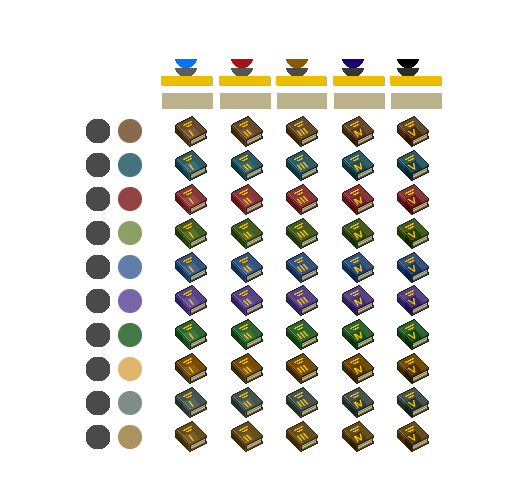
<style>
.page{position:relative;width:511px;height:487px;background:#ffffff}
.page>*{position:absolute;margin:0}
.t1{font:9px "ArialMT";letter-spacing:-0.12em;color:#ffcc00;scale:1.15 1}
</style>
<div class="page">
<p class="t1" style="left:188px;top:130px;width:6px;height:6px;rotate:-19deg">I</p>
<p class="t1" style="left:243px;top:129px;width:9px;height:8px;rotate:-28deg">I I</p>
<p class="t1" style="left:296px;top:127px;width:13px;height:9px;rotate:-24deg">I I I</p>
<p class="t1" style="left:353px;top:128px;width:9px;height:9px;rotate:-21deg">IV</p>
<p class="t1" style="left:407px;top:129px;width:9px;height:7px;rotate:-19deg">V</p>
<p class="t1" style="left:296px;top:161px;width:13px;height:9px;rotate:-24deg">I I I</p>
<p class="t1" style="left:188px;top:164px;width:6px;height:6px;rotate:-19deg">I</p>
<p class="t1" style="left:243px;top:163px;width:9px;height:8px;rotate:-28deg">I I</p>
<p class="t1" style="left:353px;top:162px;width:9px;height:9px;rotate:-21deg">IV</p>
<p class="t1" style="left:407px;top:163px;width:9px;height:7px;rotate:-19deg">V</p>
<p class="t1" style="left:188px;top:198px;width:6px;height:6px;rotate:-19deg">I</p>
<p class="t1" style="left:243px;top:197px;width:9px;height:8px;rotate:-28deg">I I</p>
<p class="t1" style="left:296px;top:195px;width:13px;height:9px;rotate:-24deg">I I I</p>
<p class="t1" style="left:353px;top:196px;width:9px;height:9px;rotate:-21deg">IV</p>
<p class="t1" style="left:407px;top:197px;width:9px;height:7px;rotate:-19deg">V</p>
<p class="t1" style="left:188px;top:232px;width:6px;height:6px;rotate:-19deg">I</p>
<p class="t1" style="left:243px;top:231px;width:9px;height:8px;rotate:-28deg">I I</p>
<p class="t1" style="left:296px;top:229px;width:13px;height:9px;rotate:-24deg">I I I</p>
<p class="t1" style="left:353px;top:230px;width:9px;height:9px;rotate:-21deg">IV</p>
<p class="t1" style="left:407px;top:231px;width:9px;height:7px;rotate:-19deg">V</p>
<p class="t1" style="left:188px;top:266px;width:6px;height:6px;rotate:-19deg">I</p>
<p class="t1" style="left:243px;top:265px;width:9px;height:8px;rotate:-28deg">I I</p>
<p class="t1" style="left:296px;top:263px;width:13px;height:9px;rotate:-24deg">I I I</p>
<p class="t1" style="left:353px;top:264px;width:9px;height:9px;rotate:-21deg">IV</p>
<p class="t1" style="left:407px;top:265px;width:9px;height:7px;rotate:-19deg">V</p>
<p class="t1" style="left:188px;top:299px;width:6px;height:6px;rotate:-19deg">I</p>
<p class="t1" style="left:243px;top:298px;width:9px;height:8px;rotate:-28deg">I I</p>
<p class="t1" style="left:296px;top:296px;width:13px;height:9px;rotate:-24deg">I I I</p>
<p class="t1" style="left:353px;top:297px;width:9px;height:9px;rotate:-21deg">IV</p>
<p class="t1" style="left:407px;top:298px;width:9px;height:7px;rotate:-19deg">V</p>
<p class="t1" style="left:188px;top:333px;width:6px;height:6px;rotate:-19deg">I</p>
<p class="t1" style="left:243px;top:332px;width:9px;height:8px;rotate:-28deg">I I</p>
<p class="t1" style="left:296px;top:330px;width:13px;height:9px;rotate:-24deg">I I I</p>
<p class="t1" style="left:353px;top:331px;width:9px;height:9px;rotate:-21deg">IV</p>
<p class="t1" style="left:407px;top:332px;width:9px;height:7px;rotate:-19deg">V</p>
<p class="t1" style="left:243px;top:366px;width:9px;height:8px;rotate:-28deg">I I</p>
<p class="t1" style="left:296px;top:364px;width:13px;height:9px;rotate:-24deg">I I I</p>
<p class="t1" style="left:353px;top:365px;width:9px;height:9px;rotate:-21deg">IV</p>
<p class="t1" style="left:407px;top:366px;width:9px;height:7px;rotate:-19deg">V</p>
<p class="t1" style="left:188px;top:367px;width:6px;height:6px;rotate:-19deg">I</p>
<p class="t1" style="left:188px;top:401px;width:6px;height:6px;rotate:-19deg">I</p>
<p class="t1" style="left:243px;top:400px;width:9px;height:8px;rotate:-28deg">I I</p>
<p class="t1" style="left:296px;top:398px;width:13px;height:9px;rotate:-24deg">I I I</p>
<p class="t1" style="left:353px;top:399px;width:9px;height:9px;rotate:-21deg">IV</p>
<p class="t1" style="left:407px;top:400px;width:9px;height:7px;rotate:-19deg">V</p>
<p class="t1" style="left:188px;top:435px;width:6px;height:6px;rotate:-19deg">I</p>
<p class="t1" style="left:243px;top:434px;width:9px;height:8px;rotate:-28deg">I I</p>
<p class="t1" style="left:296px;top:432px;width:13px;height:9px;rotate:-24deg">I I I</p>
<p class="t1" style="left:353px;top:433px;width:9px;height:9px;rotate:-21deg">IV</p>
<p class="t1" style="left:407px;top:434px;width:9px;height:7px;rotate:-19deg">V</p>
</div>
